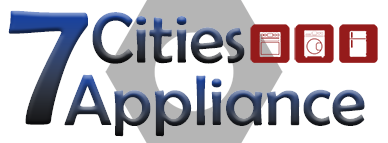
<style>
.page{position:relative;width:388px;height:143px;background:#ffffff}
.page>*{position:absolute;margin:0}
.t1{font:187.9px "BerlinSansFB-Reg"}
.t2{font:72px "BerlinSansFB-Reg"}
</style>
<div class="page">
<p class="t1" style="left:8px;top:10px;width:80px;height:115px">7</p>
<p class="t2" style="left:92px;top:12px;width:153px;height:52px">Cities</p>
<p class="t2" style="left:64px;top:74px;width:301px;height:63px">Appliance</p>
</div>
